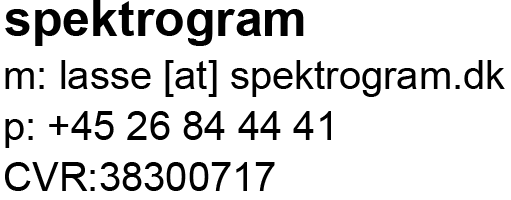
<style>
.page{position:relative;width:511px;height:200px;background:#ffffff}
.page>*{position:absolute;margin:0}
.t1{font:50px "Arial-BoldMT";color:#000000}
.t2{font:40px "ArialMT";color:#000000}
</style>
<div class="page">
<p class="t1" style="left:5px;top:0px;width:299px;height:46px">spektrogram</p>
<p class="t2" style="left:5px;top:60px;width:500px;height:37px">m: lasse [at] spektrogram.dk</p>
<p class="t2" style="left:5px;top:111px;width:326px;height:37px">p: +45 26 84 44 41</p>
<p class="t2" style="left:5px;top:162px;width:270px;height:29px">CVR:38300717</p>
</div>
